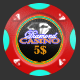
<style>
.page{position:relative;width:80px;height:80px;background:#333333}
.page>*{position:absolute;margin:0}
.t1{font:10.8px/3.6px "EdwardianScriptITC";color:#fda047}
.t2{font:6.3px/5.4px "Castellar";color:#fda047;scale:1.5 1}
.t3{font:10.6px "BernardMT-Condensed";color:#e19012;scale:1.22 1}
</style>
<div class="page">
<p class="t1" style="left:19px;top:30px;width:41px;height:14px;text-align:justify">Diamond<br><span class="t2">CASINO</span></p>
<p class="t3" style="left:34px;top:45px;width:13px;height:10px">5$</p>
</div>
